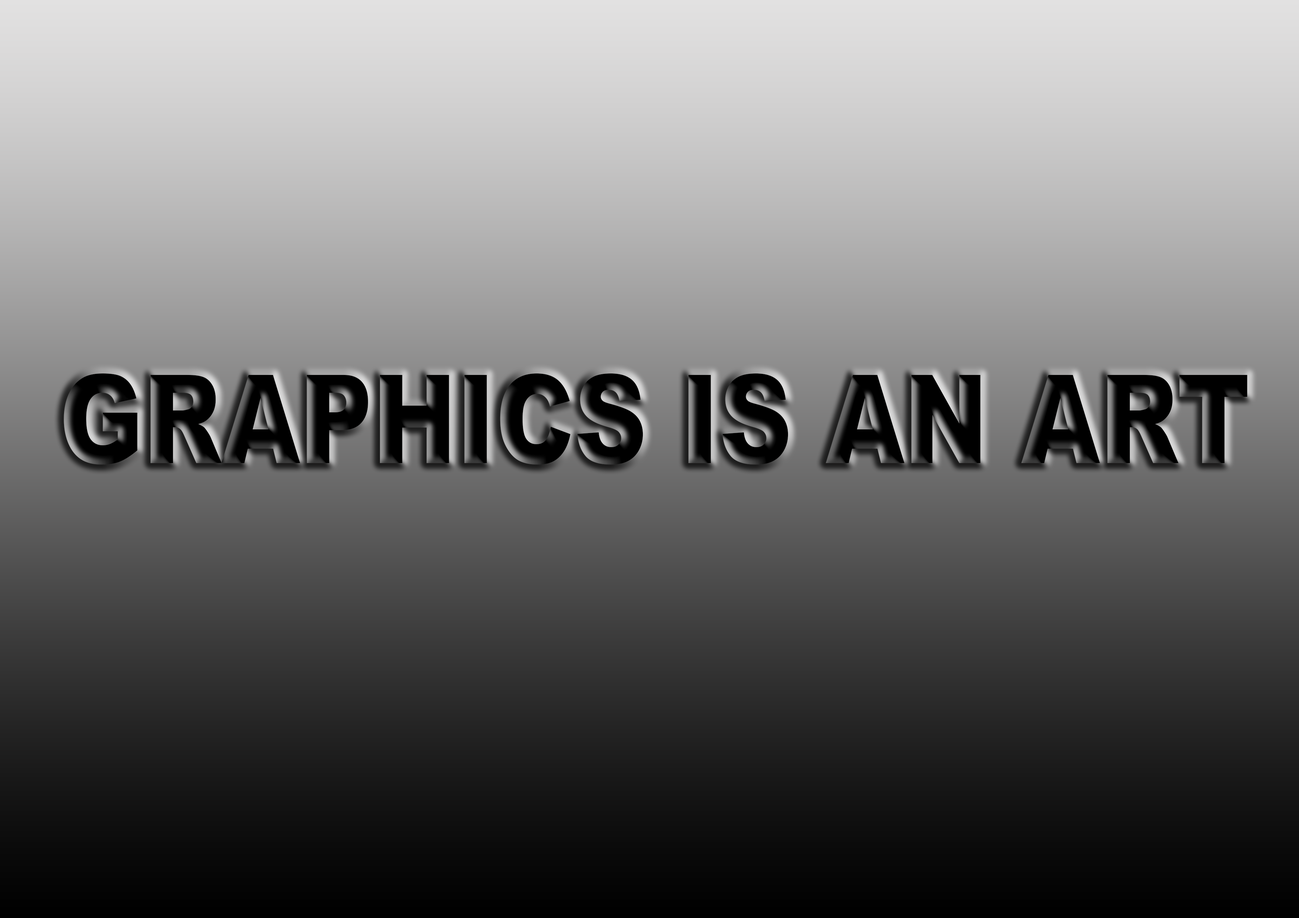
<style>
.page{position:relative;width:1299px;height:918px}
.page>*{position:absolute;margin:0}
.t1{font:123.4px "Arial-Black";color:#000000;scale:0.82 1}
</style>
<div class="page">
<p class="t1" style="left:64px;top:373px;width:1183px;height:92px">GRAPHICS IS AN ART</p>
</div>
